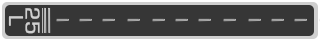
<style>
.page{position:relative;width:320px;height:40px;background:#363636}
.page>*{position:absolute;margin:0}
.t1{font:20.8px/16.7px "EurostileRegular";color:#cfcfcf;font-weight:bold}
</style>
<div class="page">
<p class="t1" style="left:8px;top:8px;width:32px;height:26px;text-align:center;rotate:90deg">25<br>L</p>
</div>
